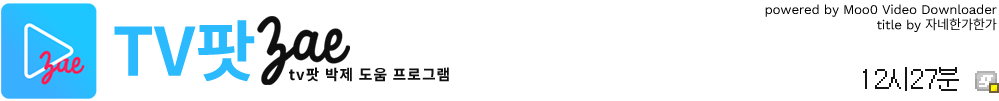
<style>
.page{position:relative;width:999px;height:101px;background:#ffffff}
.page>*{position:absolute;margin:0}
.t1{font:13.3px/14.6px "WorkSans-Regular";letter-spacing:-0.02em;color:#000000}
.t2{font:13.3px/14.6px "NotoSansCJKkr-DemiLight";letter-spacing:-0.02em;color:#000000}
.t3{font:66.5px "NotoSansCJKkr-Bold";color:#2cbaff}
.t4{font:14.7px "SpoqaHanSans-Bold";letter-spacing:0.08em;color:#0f0f0f}
</style>
<div class="page">
<p class="t1" style="left:765px;top:4px;width:232px;height:28px;text-align:right">powered by Moo0 Video Downloader<br>title by <span class="t2">자네한가한가</span></p>
<p class="t3" style="left:114px;top:20px;width:141px;height:62px">TV팟</p>
<p class="t4" style="left:289px;top:67px;width:160px;height:15px">tv팟 박제 도움 프로그램</p>
</div>
